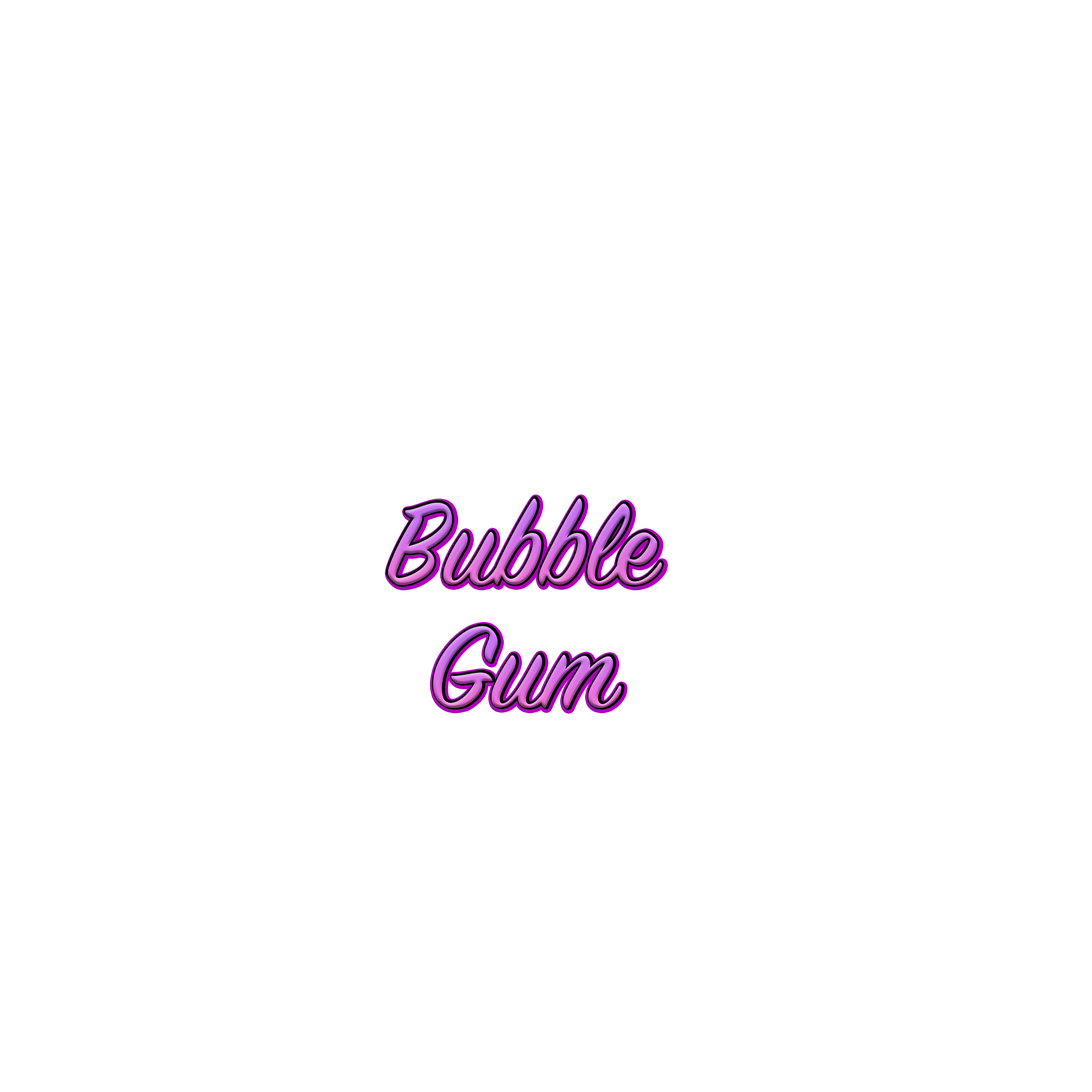
<style>
.page{position:relative;width:1092px;height:1092px;background:#ffffff}
.page>*{position:absolute;margin:0}
.t1{font:128px "SignPainter-HouseScript"}
</style>
<div class="page">
<p class="t1" style="left:391px;top:501px;width:275px;height:87px">Bubble</p>
<p class="t1" style="left:437px;top:627px;width:189px;height:83px">Gum</p>
</div>
